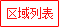
<style>
.page{position:relative;width:59px;height:27px;background:#ffffff}
.page>*{position:absolute;margin:0}
.t1{font:12px "SimSun";color:#fa1414}
</style>
<div class="page">
<p class="t1" style="left:7px;top:7px;width:46px;height:12px">区域列表</p>
</div>
